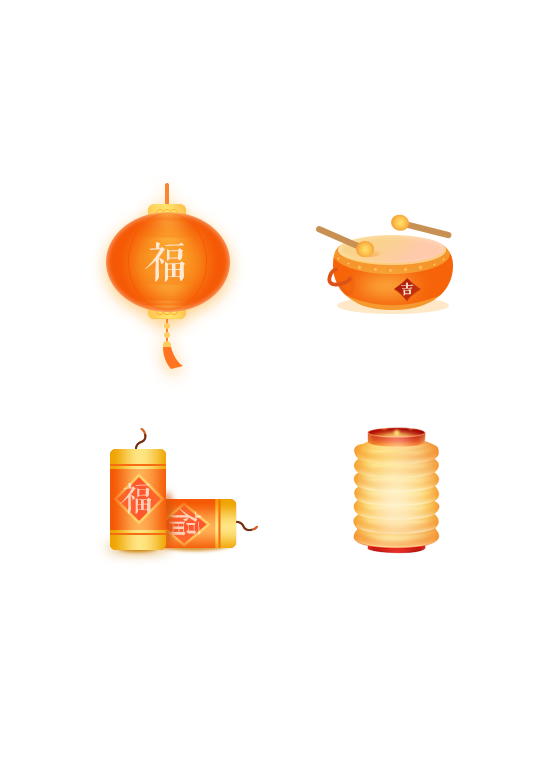
<style>
.page{position:relative;width:560px;height:760px;background:#ffffff}
.page>*{position:absolute;margin:0}
.t1{font:42.3px "FZQKBYSJW--GB1-0";letter-spacing:0.08em;color:#feead2}
.t2{font:13.5px "FZQKBYSJW--GB1-0";letter-spacing:0.08em;color:#feead2}
.t3{font:33.1px "FZQKBYSJW--GB1-0";letter-spacing:0.08em;color:#fed3b9}
.t4{font:34.4px "FZQKBYSJW--GB1-0";letter-spacing:0.08em;color:#fed2b9;scale:0.84 1}
</style>
<div class="page">
<p class="t1" style="left:145px;top:242px;width:40px;height:40px">福</p>
<p class="t2" style="left:401px;top:282px;width:13px;height:14px">吉</p>
<p class="t3" style="left:120px;top:482px;width:32px;height:32px">福</p>
<p class="t4" style="left:168px;top:508px;width:34px;height:28px;rotate:90deg">福</p>
</div>
